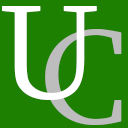
<style>
.page{position:relative;width:128px;height:128px;background:#1e8000}
.page>*{position:absolute;margin:0}
.t1{font:136px "Sylfaen";color:#ffffff}
.t2{font:136px "Sylfaen";color:#bdbdbd}
</style>
<div class="page">
<p class="t1" style="left:2px;top:6px;width:95px;height:94px">U</p>
<p class="t2" style="left:45px;top:29px;width:77px;height:96px">C</p>
</div>
